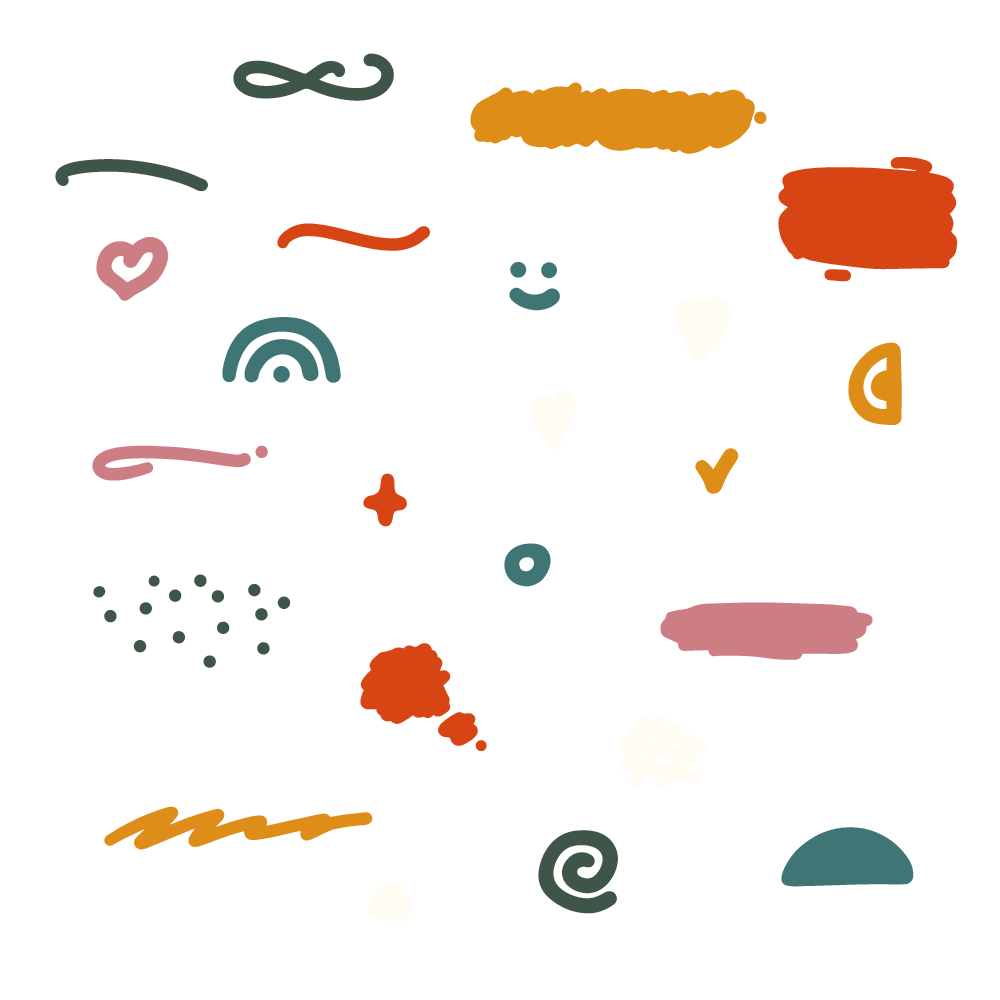
<style>
.page{position:relative;width:1000px;height:1000px;background:#ffffff}
.page>*{position:absolute;margin:0}
.t1{font:87.4px "QUIRKYSPRINGSYMBOLS";letter-spacing:0.005em;color:#3f5547}
.t2{font:87.4px "QUIRKYSPRINGSYMBOLS";letter-spacing:0.005em;color:#de8d18}
.t3{font:87.4px "QUIRKYSPRINGSYMBOLS";letter-spacing:0.005em;color:#d74515}
.t4{font:87.4px "QUIRKYSPRINGSYMBOLS";letter-spacing:0.005em;color:#cd7d84}
.t5{font:87.4px "QUIRKYSPRINGSYMBOLS";letter-spacing:0.005em;color:#407575}
.t6{font:87.4px "QUIRKYSPRINGSYMBOLS";letter-spacing:0.005em;color:#fffcf4}
</style>
<div class="page">
<p class="t1" style="left:233px;top:53px;width:161px;height:48px">C</p>
<p class="t2" style="left:470px;top:82px;width:297px;height:72px">F</p>
<p class="t1" style="left:55px;top:159px;width:153px;height:33px">b</p>
<p class="t3" style="left:778px;top:157px;width:180px;height:125px">I</p>
<p class="t3" style="left:277px;top:223px;width:153px;height:28px">D</p>
<p class="t4" style="left:96px;top:237px;width:72px;height:64px">R</p>
<p class="t5" style="left:509px;top:262px;width:51px;height:49px">A</p>
<p class="t6" style="left:674px;top:296px;width:56px;height:66px">X</p>
<p class="t5" style="left:222px;top:317px;width:119px;height:66px">M</p>
<p class="t2" style="left:848px;top:342px;width:54px;height:83px">O</p>
<p class="t6" style="left:530px;top:390px;width:46px;height:60px">S</p>
<p class="t4" style="left:92px;top:445px;width:176px;height:36px">E</p>
<p class="t2" style="left:695px;top:448px;width:44px;height:46px">W</p>
<p class="t3" style="left:363px;top:473px;width:44px;height:54px">U</p>
<p class="t5" style="left:504px;top:543px;width:47px;height:44px">V</p>
<p class="t1" style="left:93px;top:574px;width:198px;height:94px">L</p>
<p class="t4" style="left:660px;top:602px;width:213px;height:58px">G</p>
<p class="t3" style="left:360px;top:643px;width:127px;height:108px">H</p>
<p class="t6" style="left:618px;top:714px;width:91px;height:76px">J</p>
<p class="t2" style="left:104px;top:806px;width:269px;height:44px">K</p>
<p class="t1" style="left:538px;top:830px;width:80px;height:84px">P</p>
<p class="t5" style="left:781px;top:827px;width:133px;height:60px">N</p>
<p class="t6" style="left:368px;top:883px;width:45px;height:39px">T</p>
</div>
